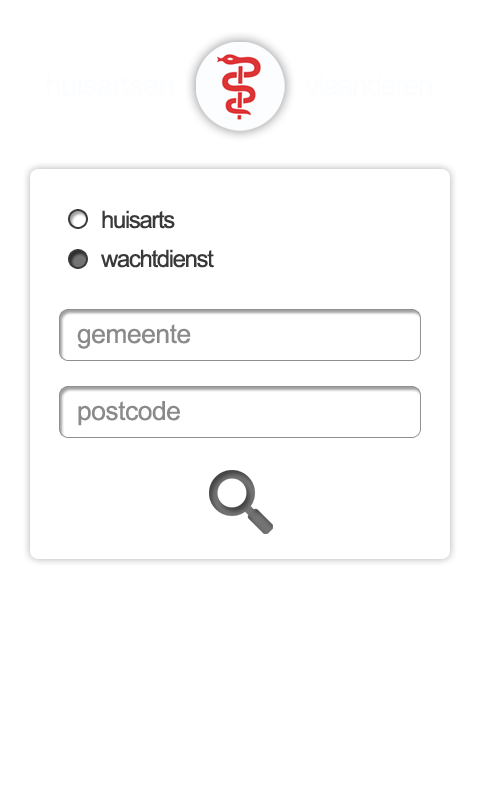
<style>
.page{position:relative;width:480px;height:800px;background:#ffffff}
.page>*{position:absolute;margin:0}
.t1{font:24px/39px "ArialMT";letter-spacing:-0.058em;color:#393939}
.t2{font:26.4px "ArialMT";letter-spacing:-0.018em;color:#8a8a8a}
</style>
<div class="page">
<p class="t1" style="left:101px;top:210px;width:113px;height:58px">huisarts<br>wachtdienst</p>
<p class="t2" style="left:77px;top:324px;width:114px;height:25px">gemeente</p>
<p class="t2" style="left:78px;top:401px;width:102px;height:25px">postcode</p>
</div>
